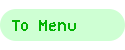
<style>
.page{position:relative;width:125px;height:50px;background:#ceffd3}
.page>*{position:absolute;margin:0}
.t1{font:16px "VCROSDMono";color:#04b304}
</style>
<div class="page">
<p class="t1" style="left:12px;top:20px;width:64px;height:11px">To Menu</p>
</div>
